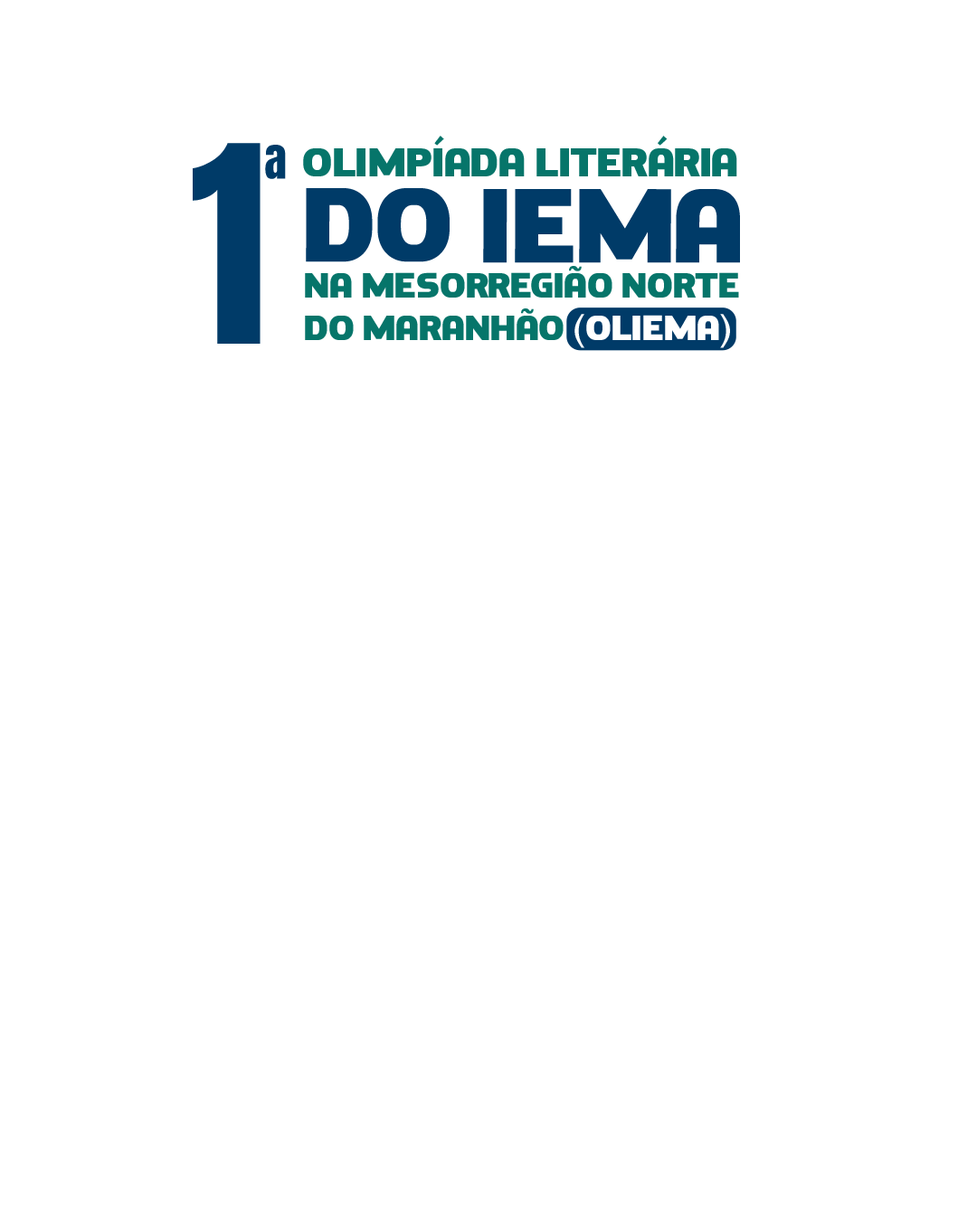
<style>
.page{position:relative;width:977px;height:1221px;background:#ffffff}
.page>*{position:absolute;margin:0}
.t1{font:40.1px "Dove-Regular";color:#06756a}
.t2{font:233px "Anton-Regular";color:#003b68}
.t3{font:57.5px "Anton-Regular";color:#003b68}
.t4{font:104.6px "Dove-Regular";color:#003b68}
.t5{font:34.8px "Dove-Regular";color:#06756a}
.t6{font:34.8px "Dove-Regular";color:#ffffff}
</style>
<div class="page">
<p class="t1" style="left:303px;top:136px;width:434px;height:40px">Olimpíada Literária</p>
<p class="t2" style="left:193px;top:143px;width:67px;height:201px">1</p>
<p class="t3" style="left:265px;top:145px;width:21px;height:34px">ª</p>
<p class="t4" style="left:306px;top:188px;width:434px;height:75px">do IEMA</p>
<p class="t5" style="left:305px;top:266px;width:434px;height:82px">na mesorregião norte do Maranhão <span class="t6">(OLIEMA)</span></p>
</div>
